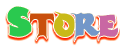
<style>
.page{position:relative;width:126px;height:50px;background:#ffffff}
.page>*{position:absolute;margin:0}
.t1{font:36px "Casper"}
.t2{font:36px "Casper";color:#2ac94f}
.t3{font:36px "Casper";color:#c94f0c}
.t4{font:36px "Casper";color:#c9ba18}
.t5{font:36px "Casper";color:#7397c9}
.t6{font:36px "Casper";color:#c967a3}
</style>
<div class="page">
<p class="t1" style="left:7px;top:6px;width:111px;height:36px">Store</p>
<p class="t1" style="left:7px;top:6px;width:111px;height:36px">Store</p>
<p class="t1" style="left:7px;top:6px;width:111px;height:36px">Store</p>
<p class="t1" style="left:7px;top:6px;width:111px;height:36px">Store</p>
<p class="t2" style="left:7px;top:6px;width:111px;height:36px">S<span class="t3">t</span><span class="t4">o</span><span class="t5">r</span><span class="t6">e</span></p>
</div>
